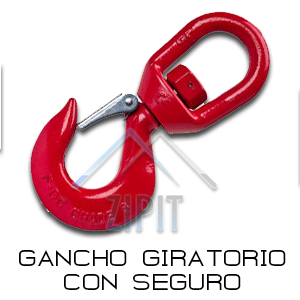
<style>
.page{position:relative;width:300px;height:300px;background:#ffffff}
.page>*{position:absolute;margin:0}
.t1{font:20px "GearusBold";color:#000000}
</style>
<div class="page">
<p class="t1" style="left:19px;top:250px;width:267px;height:40px;text-align:center">GANCHO GIRATORIO<br>CON SEGURO</p>
</div>
